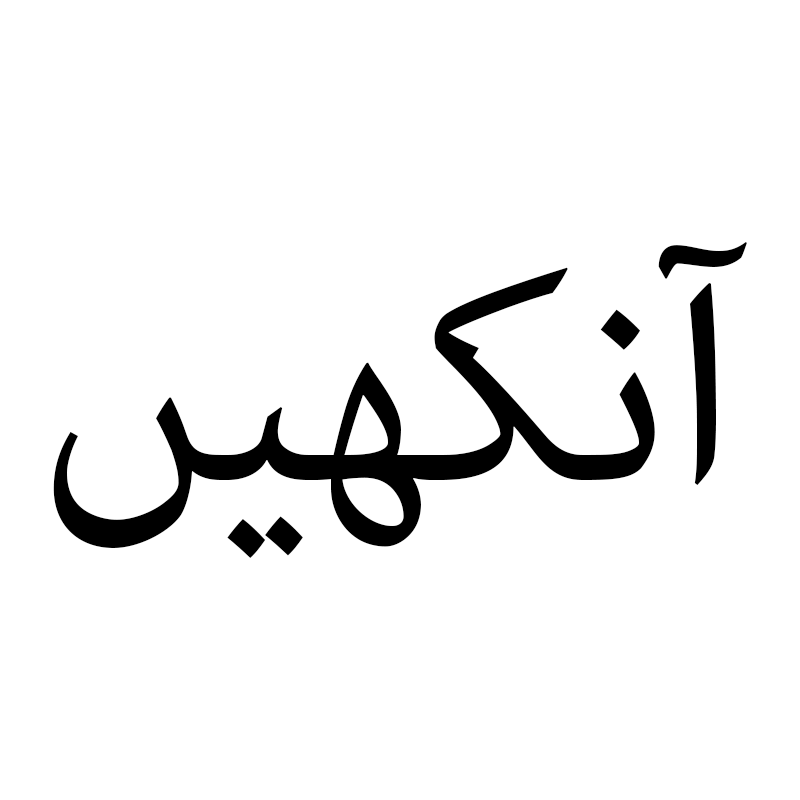
<style>
.page{position:relative;width:800px;height:800px;background:#ffffff}
.page>*{position:absolute;margin:0}
.t1{font:400px "AdobeArabic-Regular";color:#000000}
</style>
<div class="page">
<p class="t1" style="left:53px;top:242px;width:694px;height:316px">آنکھیں</p>
</div>
